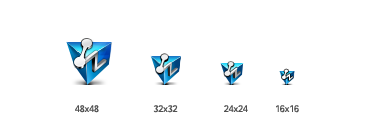
<style>
.page{position:relative;width:374px;height:137px;background:#ffffff}
.page>*{position:absolute;margin:0}
.t1{font:10px "SIL-Hei-Med-Jian";letter-spacing:-0.06em;color:#515151}
</style>
<div class="page">
<p class="t1" style="left:75px;top:105px;width:224px;height:8px">48x48                    32x32                 24x24          16x16</p>
</div>
